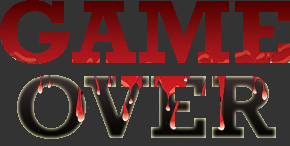
<style>
.page{position:relative;width:290px;height:146px;background:#333333}
.page>*{position:absolute;margin:0}
.t1{font:91.7px "Rockwell-Bold"}
</style>
<div class="page">
<p class="t1" style="left:0px;top:0px;width:290px;height:139px">GAME OVER</p>
</div>
